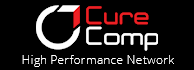
<style>
.page{position:relative;width:194px;height:70px;background:#000000}
.page>*{position:absolute;margin:0}
.t1{font:12px "OpenSans-Light";letter-spacing:0.01em;color:#ffffff}
</style>
<div class="page">
<p class="t1" style="left:22px;top:55px;width:152px;height:12px">High Performance Network</p>
</div>
